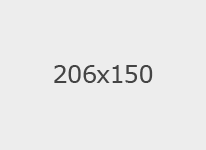
<style>
.page{position:relative;width:206px;height:150px;background:#ededed}
.page>*{position:absolute;margin:0}
.t1{font:24px "Verdana";color:#444444}
</style>
<div class="page">
<p class="t1" style="left:54px;top:65px;width:99px;height:18px">206x150</p>
</div>
